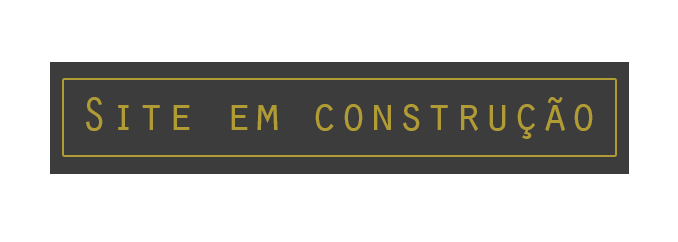
<style>
.page{position:relative;width:678px;height:242px;background:#ffffff}
.page>*{position:absolute;margin:0}
.t1{font:48px "OratorStd";color:#b19b35}
</style>
<div class="page">
<p class="t1" style="left:86px;top:97px;width:507px;height:42px">Site em construção</p>
</div>
